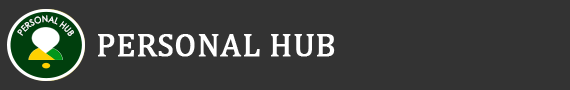
<style>
.page{position:relative;width:570px;height:90px;background:#333333}
.page>*{position:absolute;margin:0}
.t1{font:8.6px "CenturyGothic";color:#ffffff;scale:0.92 1}
.t2{font:33.3px "Cambria";color:#ffffff;font-weight:bold}
</style>
<div class="page">
<p class="t1" style="left:17px;top:15px;width:57px;height:21px;rotate:-175deg">PERSONAL HUB</p>
<p class="t2" style="left:98px;top:34px;width:237px;height:23px">PERSONAL HUB</p>
</div>
